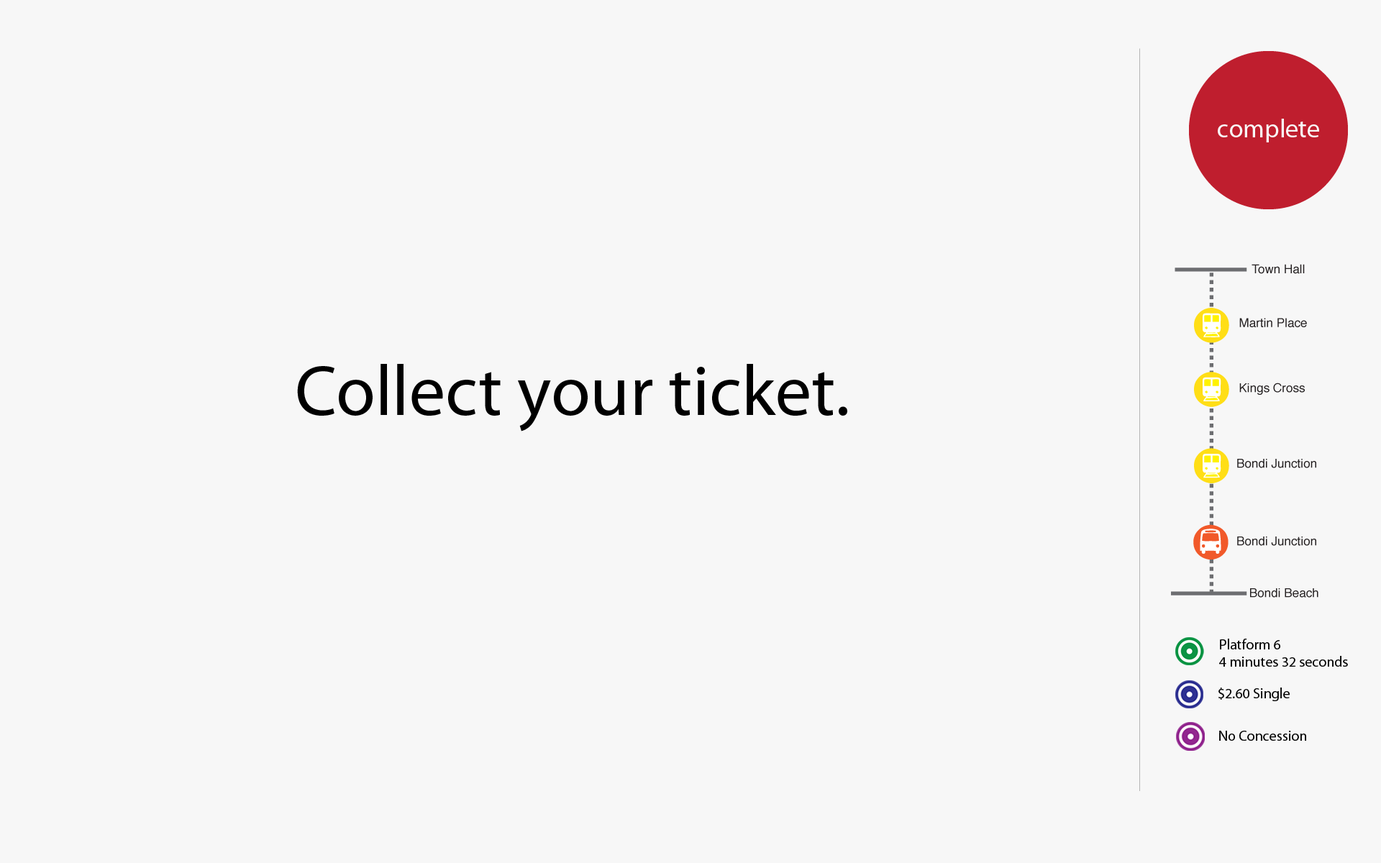
<style>
.page{position:relative;width:1381px;height:863px;background:#f7f7f7}
.page>*{position:absolute;margin:0}
.t1{font:25.9px "MyriadPro-Regular";color:#f8f8f8}
.t2{font:71.9px "MyriadPro-Regular";color:#000000}
.t3{font:14.4px "MyriadPro-Regular";color:#000000}
</style>
<div class="page">
<p class="t1" style="left:1218px;top:119px;width:101px;height:23px">complete</p>
<p class="t2" style="left:297px;top:364px;width:550px;height:68px">Collect your ticket.</p>
<p class="t3" style="left:1219px;top:639px;width:129px;height:28px">Platform 6<br>4 minutes 32 seconds</p>
<p class="t3" style="left:1219px;top:688px;width:71px;height:13px">$2.60 Single</p>
<p class="t3" style="left:1219px;top:731px;width:87px;height:10px">No Concession</p>
</div>
